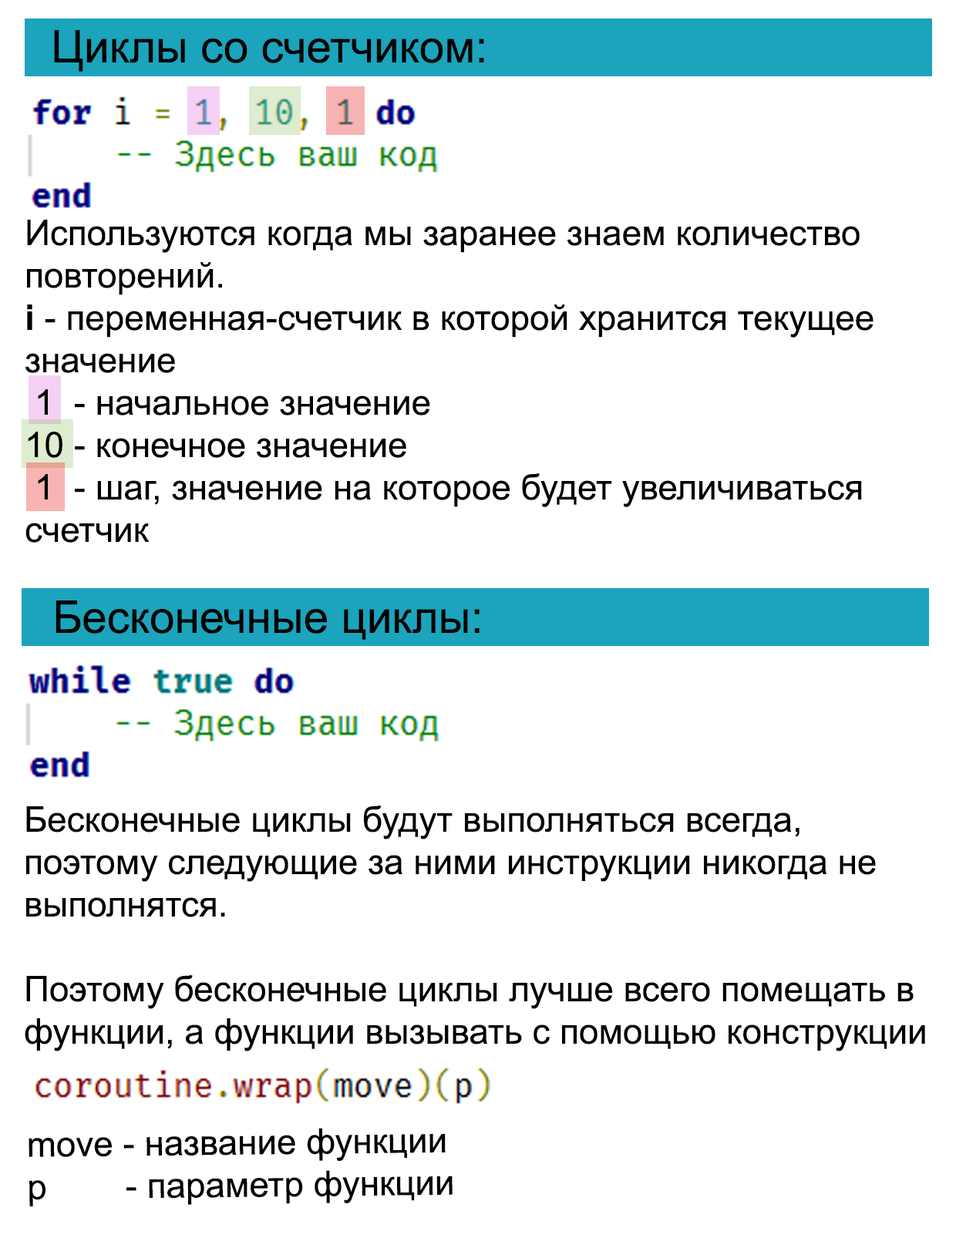
<style>
.page{position:relative;width:956px;height:1248px;background:#ffffff}
.page>*{position:absolute;margin:0}
.t1{font:45px "ArialMT";color:#000000}
.t2{font:35.3px "ArialMT";color:#000000}
.t3{font:35.3px "Arial-BoldMT";color:#000000}
</style>
<div class="page">
<p class="t1" style="left:54px;top:30px;width:430px;height:42px">Циклы со счетчиком:</p>
<p class="t2" style="left:25px;top:220px;width:848px;height:323px">Используются когда мы заранее знаем количество повторений.<br><span class="t3">i </span>- переменная-счетчик в которой хранится текущее значение<br> 1  - начальное значение<br>10 - конечное значение<br> 1  - шаг, значение на которое будет увеличиваться          счетчик</p>
<p class="t1" style="left:55px;top:600px;width:424px;height:40px">Бесконечные циклы:</p>
<p class="t2" style="left:25px;top:805px;width:900px;height:246px">Бесконечные циклы будут выполняться всегда, поэтому следующие за ними инструкции никогда не выполнятся. <br><br>Поэтому бесконечные циклы лучше всего помещать в функции, а функции вызывать с помощью конструкции</p>
<p class="t2" style="left:29px;top:1128px;width:423px;height:78px;rotate:-1deg">move - название функции<br>p        - параметр функции</p>
</div>
